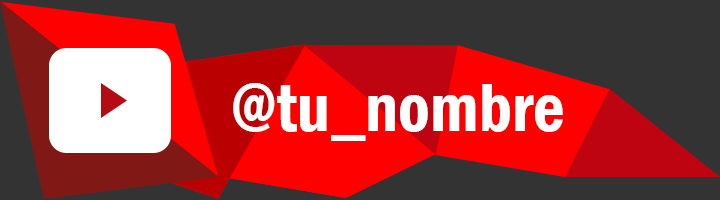
<style>
.page{position:relative;width:720px;height:200px;background:#333333}
.page>*{position:absolute;margin:0}
.t1{font:69.7px "FranklinGothic-DemiCond";color:#ffffff}
</style>
<div class="page">
<p class="t1" style="left:233px;top:83px;width:330px;height:58px">@tu_nombre</p>
</div>
